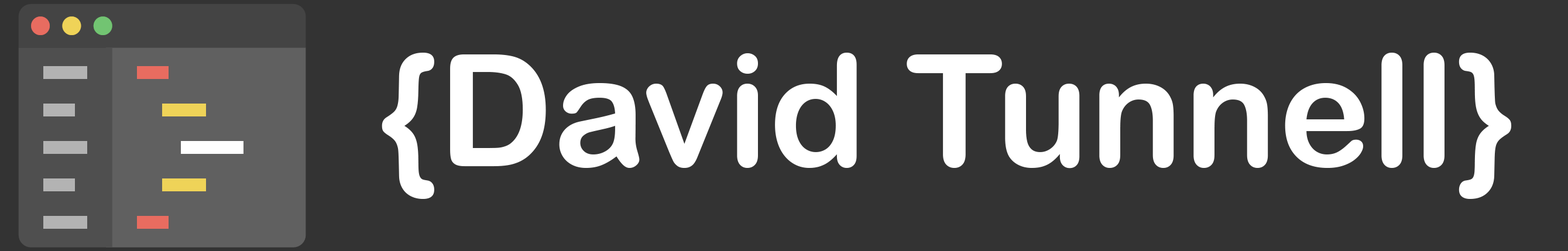
<style>
.page{position:relative;width:1568px;height:251px;background:#333333}
.page>*{position:absolute;margin:0}
.t1{font:156.1px "ArialRoundedMTBold";color:#ffffff}
</style>
<div class="page">
<p class="t1" style="left:382px;top:53px;width:1130px;height:146px">{David Tunnell}</p>
</div>
